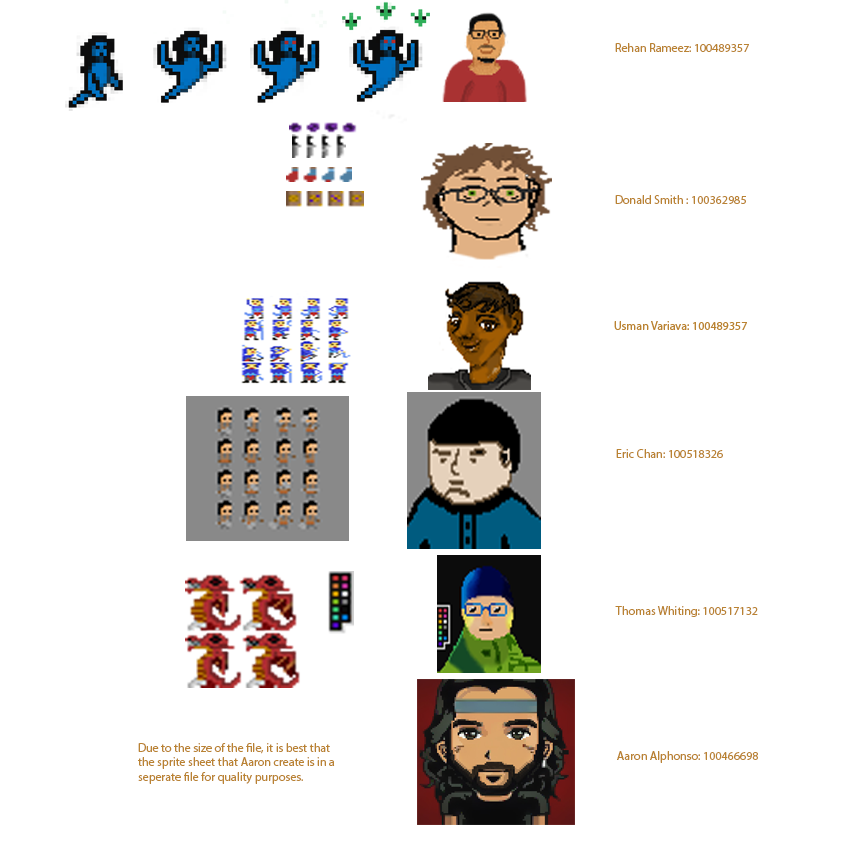
<style>
.page{position:relative;width:850px;height:850px;background:#ffffff}
.page>*{position:absolute;margin:0}
.t1{font:12px "MyriadPro-Regular";color:#ba8333}
</style>
<div class="page">
<p class="t1" style="left:615px;top:43px;width:134px;height:9px">Rehan Rameez: 100489357</p>
<p class="t1" style="left:615px;top:195px;width:131px;height:9px">Donald Smith : 100362985</p>
<p class="t1" style="left:616px;top:449px;width:107px;height:9px">Eric Chan: 100518326</p>
<p class="t1" style="left:615px;top:606px;width:143px;height:11px">Thomas Whiting: 100517132</p>
<p class="t1" style="left:138px;top:743px;width:197px;height:41px">Due to the size of the file, it is best that the sprite sheet that Aaron create is in a seperate file for quality purposes.</p>
<p class="t1" style="left:617px;top:751px;width:141px;height:12px">Aaron Alphonso: 100466698</p>
</div>
